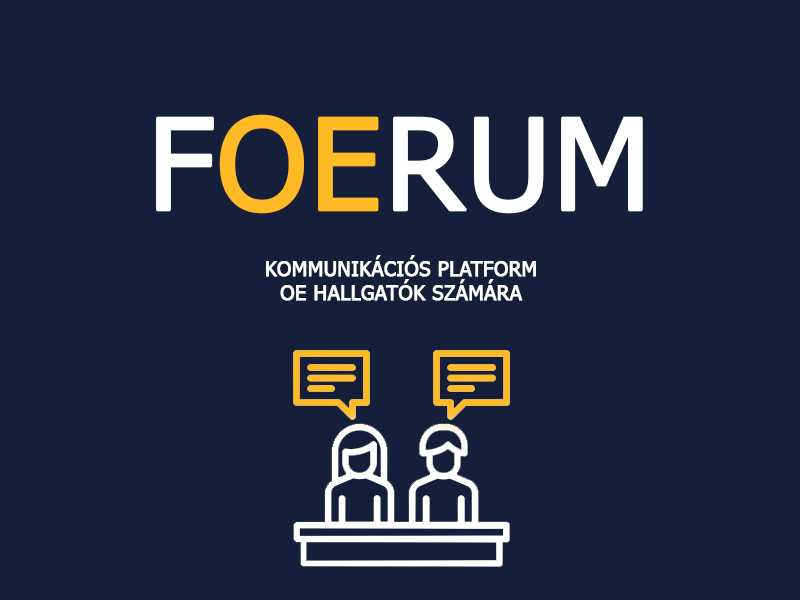
<style>
.page{position:relative;width:800px;height:600px;background:#151f39}
.page>*{position:absolute;margin:0}
.t1{font:126.3px "Tahoma";color:#ffffff;text-transform:uppercase;font-weight:bold}
.t2{font:126.3px "Tahoma";color:#ffba26;text-transform:uppercase;font-weight:bold}
.t3{font:20px "Tahoma";color:#ffffff;text-transform:uppercase;font-weight:bold}
</style>
<div class="page">
<p class="t1" style="left:156px;top:114px;width:487px;height:100px">f<span class="t2">OE</span>rum</p>
<p class="t3" style="left:266px;top:255px;width:270px;height:46px;text-align:center">Kommunikációs platform<br>OE hallgatók számára</p>
</div>
